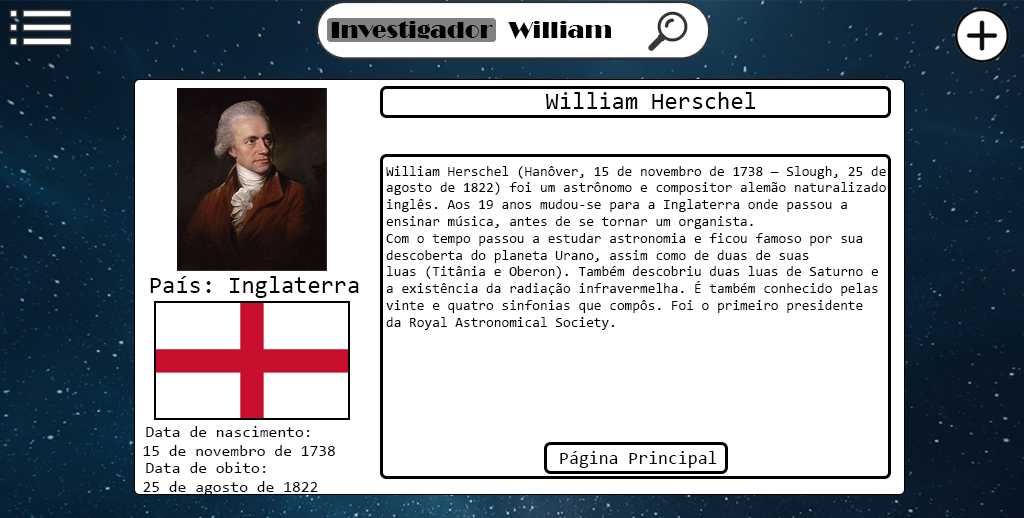
<style>
.page{position:relative;width:1024px;height:518px;background:#ffffff}
.page>*{position:absolute;margin:0}
.t1{font:24px "Broadway";color:#000000}
.t2{font:24px "Consolas";color:#000000}
.t3{font:14px "Consolas";color:#000000}
.t4{font:16px "Consolas";color:#000000}
.t5{font:18px "Consolas";color:#000000}
</style>
<div class="page">
<p class="t1" style="left:331px;top:21px;width:162px;height:18px">Investigador</p>
<p class="t1" style="left:508px;top:21px;width:103px;height:18px">William</p>
<p class="t2" style="left:545px;top:92px;width:211px;height:17px">William Herschel</p>
<p class="t3" style="left:386px;top:166px;width:500px;height:164px">William Herschel (Hanôver, 15 de novembro de 1738 — Slough, 25 de <br>agosto de 1822) foi um astrônomo e compositor alemão naturalizado <br>inglês. Aos 19 anos mudou-se para a Inglaterra onde passou a <br>ensinar música, antes de se tornar um organista. <br>Com o tempo passou a estudar astronomia e ficou famoso por sua <br>descoberta do planeta Urano, assim como de duas de suas <br>luas (Titânia e Oberon). Também descobriu duas luas de Saturno e <br>a existência da radiação infravermelha. É também conhecido pelas <br>vinte e quatro sinfonias que compôs. Foi o primeiro presidente <br>da Royal Astronomical Society.</p>
<p class="t2" style="left:150px;top:276px;width:209px;height:22px">País: Inglaterra</p>
<p class="t4" style="left:143px;top:426px;width:192px;height:30px">Data de nascimento: <br>15 de novembro de 1738</p>
<p class="t4" style="left:143px;top:462px;width:175px;height:33px">Data de obito: <br>25 de agosto de 1822</p>
<p class="t5" style="left:560px;top:451px;width:157px;height:17px">Página Principal</p>
</div>
